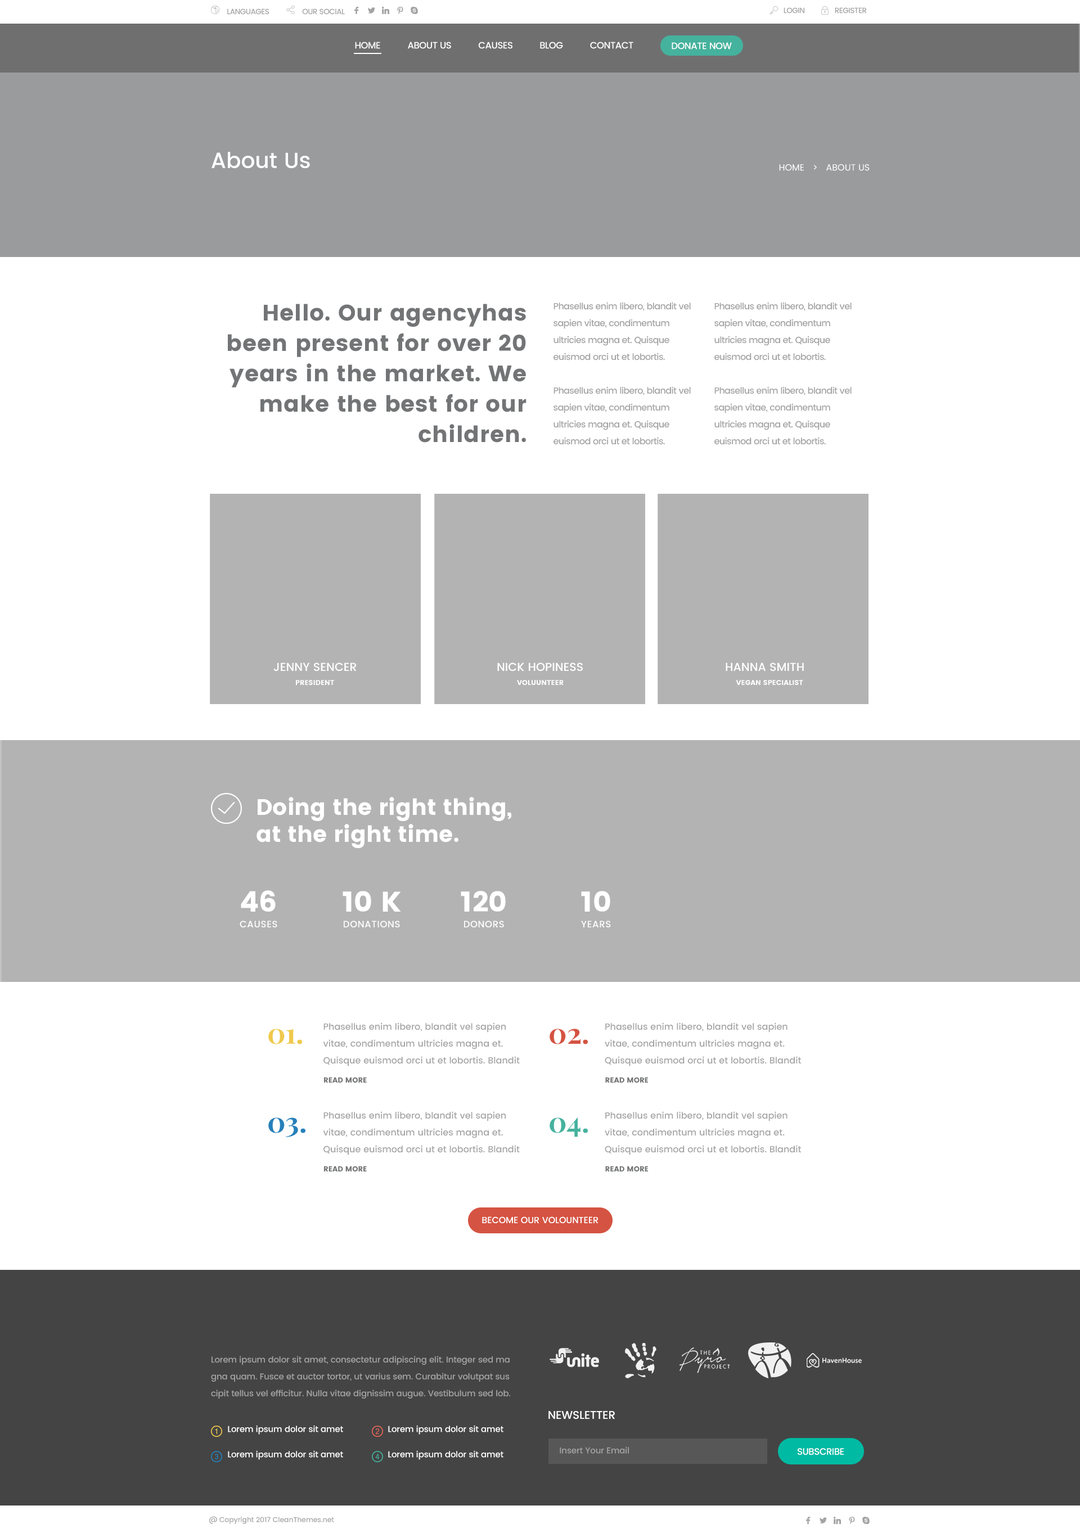
<style>
.page{position:relative;width:1080px;height:1537px;background:#ffffff}
.page>*{position:absolute;margin:0}
.t1{font:7.6px "Poppins-Medium";letter-spacing:-0.04em;color:#a3a3a3;text-transform:uppercase}
.t2{font:7.6px "Poppins-Medium";letter-spacing:-0.04em;color:#a3a3a3}
.t3{font:9.3px "Poppins-Medium";letter-spacing:-0.03em;color:#ffffff;text-transform:uppercase}
.t4{font:21.9px "Poppins-Medium";color:#ffffff}
.t5{font:9px "Poppins-Regular";color:#ffffff;text-transform:uppercase}
.t6{font:22.5px/30.4px "Poppins";letter-spacing:0.02em;color:#727475}
.t7{font:9px/16.9px "Poppins-Medium";letter-spacing:-0.04em;color:#a3a3a3}
.t8{font:11.6px "Poppins-Medium";color:#ffffff;text-transform:uppercase}
.t9{font:7px "Poppins";color:#ffffff}
.t10{font:22.5px/26.9px "Poppins";color:#ffffff}
.t11{font:28.4px "Poppins";color:#ffffff}
.t12{font:9.3px "Poppins-Medium";letter-spacing:0.04em;color:#ffffff}
.t13{font:9px/16.9px "Poppins-Medium";color:#a3a3a3}
.t14{font:28.4px "PlayfairDisplay-Bold";color:#efc94c}
.t15{font:28.4px "PlayfairDisplay-Bold";color:#d55342}
.t16{font:7.3px "Poppins";color:#727475}
.t17{font:28.4px "PlayfairDisplay-Bold";color:#2780ba}
.t18{font:28.4px "PlayfairDisplay-Bold";color:#45b29d}
.t19{font:9px "Poppins-Medium";letter-spacing:-0.01em;color:#ffffff;text-transform:uppercase}
.t20{font:8.4px/16.9px "Poppins-Medium";letter-spacing:-0.01em;color:#a3a3a3}
.t21{font:11.2px "Poppins-Medium";letter-spacing:-0.01em;color:#ffffff}
.t22{font:8.4px "Poppins-Medium";letter-spacing:-0.01em;color:#ffffff}
.t23{font:8.4px "Poppins-Medium";letter-spacing:-0.01em;color:#a3a3a3}
.t24{font:9.3px "Poppins-Medium";letter-spacing:-0.03em;color:#ffffff}
.t25{font:7px "Poppins-Medium";letter-spacing:-0.01em;color:#a3a3a3}
</style>
<div class="page">
<p class="t1" style="left:227px;top:8px;width:42px;height:7px">languages</p>
<p class="t2" style="left:302px;top:8px;width:43px;height:7px">OUR SOCIAL</p>
<p class="t1" style="left:784px;top:7px;width:20px;height:7px">LOGIN</p>
<p class="t2" style="left:835px;top:7px;width:32px;height:7px">REGISTER</p>
<p class="t3" style="left:355px;top:42px;width:25px;height:7px">HOME</p>
<p class="t3" style="left:408px;top:42px;width:43px;height:7px">ABOUT US</p>
<p class="t3" style="left:478px;top:42px;width:34px;height:7px">causes</p>
<p class="t3" style="left:540px;top:42px;width:23px;height:7px">BLOG</p>
<p class="t3" style="left:590px;top:42px;width:43px;height:7px">CONTACT</p>
<p class="t3" style="left:672px;top:42px;width:60px;height:8px">DONATE NOW</p>
<p class="t4" style="left:212px;top:152px;width:98px;height:16px">About Us</p>
<p class="t5" style="left:779px;top:164px;width:91px;height:7px">HOme   &gt;   ABOUT US</p>
<p class="t6" style="left:228px;top:304px;width:298px;height:139px;text-align:right">Hello. Our agencyhas been present for over 20 years in the market. We <br>make the best for our<br>children.</p>
<p class="t7" style="left:554px;top:302px;width:137px;height:59px">Phasellus enim libero, blandit vel<br>sapien vitae, condimentum<br>ultricies magna et. Quisque<br>euismod orci ut et lobortis.</p>
<p class="t7" style="left:714px;top:302px;width:138px;height:59px">Phasellus enim libero, blandit vel<br>sapien vitae, condimentum<br>ultricies magna et. Quisque<br>euismod orci ut et lobortis.</p>
<p class="t7" style="left:554px;top:386px;width:137px;height:59px">Phasellus enim libero, blandit vel<br>sapien vitae, condimentum<br>ultricies magna et. Quisque<br>euismod orci ut et lobortis.</p>
<p class="t7" style="left:714px;top:386px;width:138px;height:59px">Phasellus enim libero, blandit vel<br>sapien vitae, condimentum<br>ultricies magna et. Quisque<br>euismod orci ut et lobortis.</p>
<p class="t8" style="left:274px;top:663px;width:83px;height:9px">Jenny Sencer</p>
<p class="t8" style="left:497px;top:663px;width:86px;height:9px">NICK HOPINESS</p>
<p class="t8" style="left:726px;top:663px;width:78px;height:9px">HANNA SMITH</p>
<p class="t9" style="left:296px;top:680px;width:38px;height:5px">PRESIDENT</p>
<p class="t9" style="left:517px;top:680px;width:47px;height:5px">VOLUUNTEER</p>
<p class="t9" style="left:736px;top:680px;width:67px;height:5px">VEGAN SPECIALIST</p>
<p class="t10" style="left:256px;top:797px;width:255px;height:51px">Doing the right thing,<br>at the right time.</p>
<p class="t11" style="left:241px;top:890px;width:35px;height:22px">46</p>
<p class="t11" style="left:343px;top:891px;width:58px;height:21px">10 K</p>
<p class="t11" style="left:461px;top:891px;width:45px;height:21px">120</p>
<p class="t11" style="left:581px;top:891px;width:29px;height:21px">10</p>
<p class="t12" style="left:240px;top:921px;width:37px;height:7px">CAUSES</p>
<p class="t12" style="left:344px;top:921px;width:56px;height:7px">DONATIONS</p>
<p class="t12" style="left:464px;top:921px;width:40px;height:7px">DONORS</p>
<p class="t12" style="left:581px;top:921px;width:30px;height:7px">YEARS</p>
<p class="t13" style="left:323px;top:1023px;width:197px;height:43px">Phasellus enim libero, blandit vel sapien vitae, condimentum ultricies magna et. Quisque euismod orci ut et lobortis. Blandit vel sapien<br>vitae, condimentum ultricies magna et orci ut et lobortis</p>
<p class="t13" style="left:605px;top:1023px;width:196px;height:43px">Phasellus enim libero, blandit vel sapien vitae, condimentum ultricies magna et. Quisque euismod orci ut et lobortis. Blandit vel sapien<br>vitae, condimentum ultricies magna et orci ut et lobortis</p>
<p class="t14" style="left:268px;top:1029px;width:34px;height:16px">01.</p>
<p class="t15" style="left:550px;top:1029px;width:38px;height:16px">02.</p>
<p class="t16" style="left:324px;top:1077px;width:43px;height:6px">READ MORE</p>
<p class="t16" style="left:605px;top:1077px;width:43px;height:6px">READ MORE</p>
<p class="t17" style="left:268px;top:1118px;width:37px;height:19px">03.</p>
<p class="t13" style="left:323px;top:1112px;width:197px;height:43px">Phasellus enim libero, blandit vel sapien vitae, condimentum ultricies magna et. Quisque euismod orci ut et lobortis. Blandit vel sapien<br>vitae, condimentum ultricies magna et orci ut et lobortis</p>
<p class="t18" style="left:550px;top:1118px;width:38px;height:19px">04.</p>
<p class="t13" style="left:605px;top:1112px;width:196px;height:43px">Phasellus enim libero, blandit vel sapien vitae, condimentum ultricies magna et. Quisque euismod orci ut et lobortis. Blandit vel sapien<br>vitae, condimentum ultricies magna et orci ut et lobortis</p>
<p class="t16" style="left:324px;top:1166px;width:43px;height:6px">READ MORE</p>
<p class="t16" style="left:605px;top:1166px;width:43px;height:6px">READ MORE</p>
<p class="t19" style="left:482px;top:1217px;width:116px;height:6px">Become our volounteer</p>
<p class="t20" style="left:211px;top:1356px;width:300px;height:43px">Lorem ipsum dolor sit amet, consectetur adipiscing elit. Integer sed ma<br>gna quam. Fusce et auctor tortor, ut varius sem. Curabitur volutpat sus<br>cipit tellus vel efficitur. Nulla vitae dignissim augue. Vestibulum sed lob.</p>
<p class="t21" style="left:548px;top:1411px;width:67px;height:9px">NEWSLETTER</p>
<p class="t22" style="left:228px;top:1425px;width:115px;height:10px">Lorem ipsum dolor sit amet</p>
<p class="t22" style="left:388px;top:1425px;width:115px;height:10px">Lorem ipsum dolor sit amet</p>
<p class="t22" style="left:228px;top:1451px;width:115px;height:9px">Lorem ipsum dolor sit amet</p>
<p class="t22" style="left:388px;top:1451px;width:115px;height:9px">Lorem ipsum dolor sit amet</p>
<p class="t23" style="left:560px;top:1447px;width:69px;height:7px">Insert Your Email</p>
<p class="t24" style="left:798px;top:1448px;width:46px;height:7px">SUBSCRIBE</p>
<p class="t25" style="left:209px;top:1516px;width:125px;height:8px">@ Copyright 2017 CleanThemes.net</p>
</div>
